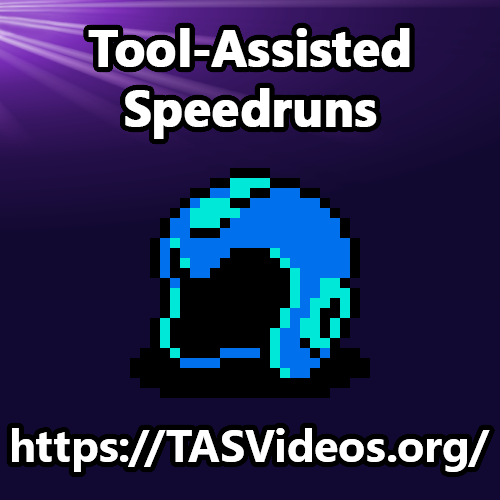
<style>
.page{position:relative;width:500px;height:500px;background:#110931}
.page>*{position:absolute;margin:0}
.t1{font:50px "SegoeUI-Bold";color:#ffffff;font-weight:bold}
.t2{font:45px "SegoeUI-Bold";color:#ffffff}
</style>
<div class="page">
<p class="t1" style="left:88px;top:28px;width:322px;height:111px;text-align:center">Tool-Assisted<br>Speedruns</p>
<p class="t2" style="left:12px;top:428px;width:478px;height:44px">https://TASVideos.org/</p>
</div>
